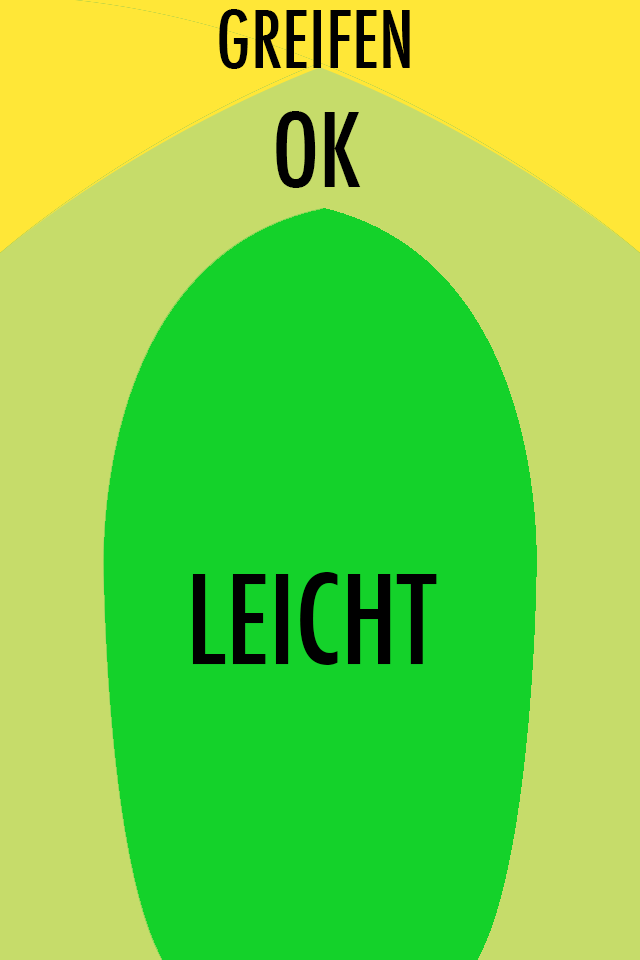
<style>
.page{position:relative;width:640px;height:960px;background:#14d22a}
.page>*{position:absolute;margin:0}
.t1{font:77.5px "Futura-CondensedMedium";color:#000000;scale:0.96 1}
.t2{font:99px "Futura-CondensedMedium";color:#000000}
.t3{font:120px "Futura-CondensedMedium";color:#000000}
</style>
<div class="page">
<p class="t1" style="left:219px;top:9px;width:191px;height:60px">GREIFEN</p>
<p class="t2" style="left:276px;top:111px;width:85px;height:77px">OK</p>
<p class="t3" style="left:192px;top:572px;width:245px;height:93px">LEICHT</p>
</div>
